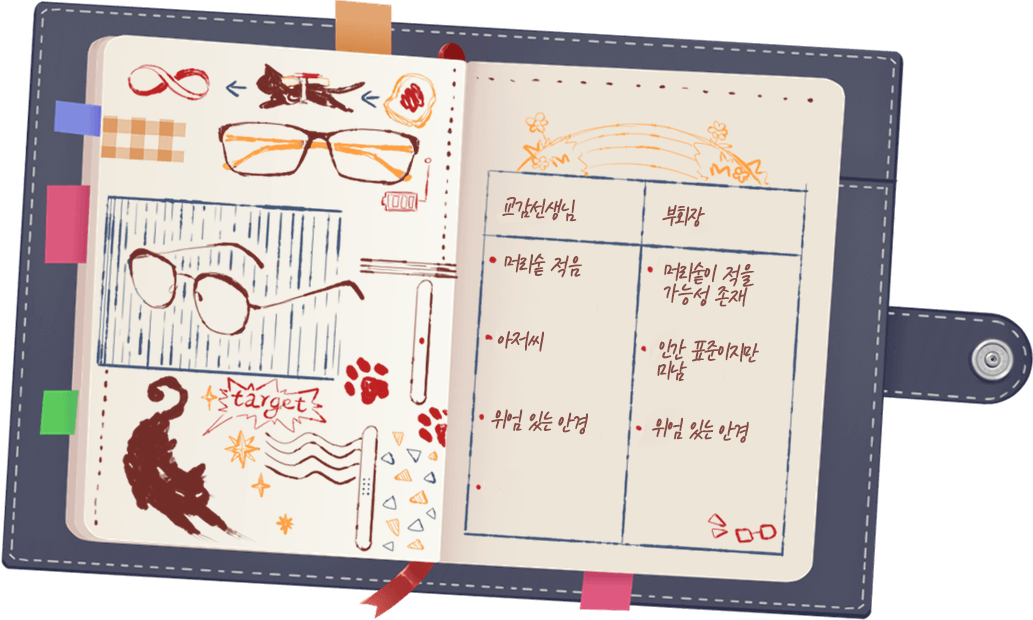
<style>
.page{position:relative;width:1033px;height:620px}
.page>*{position:absolute;margin:0}
.t1{font:27.3px "KCC-eunyoung-Regular";letter-spacing:-0.08em;color:#884d46;font-weight:bold}
.t2{font:27.3px/22px "KCC-eunyoung-Regular";letter-spacing:-0.08em;color:#884d46;font-weight:bold}
</style>
<div class="page">
<p class="t1" style="left:502px;top:197px;width:75px;height:25px;rotate:3deg">교감선생님</p>
<p class="t1" style="left:662px;top:204px;width:43px;height:23px;rotate:3deg">부회장</p>
<p class="t1" style="left:504px;top:253px;width:78px;height:25px;rotate:3deg">머리숱 적음</p>
<p class="t2" style="left:663px;top:261px;width:92px;height:46px;rotate:3deg">머리숱이 적을<br>가능성 존재</p>
<p class="t1" style="left:497px;top:331px;width:48px;height:21px;rotate:3deg">아저씨</p>
<p class="t2" style="left:657px;top:338px;width:102px;height:44px;rotate:3deg">인간 표준이지만<br>미남</p>
<p class="t1" style="left:491px;top:409px;width:97px;height:26px;rotate:3deg">위엄 있는 안경</p>
<p class="t1" style="left:652px;top:417px;width:97px;height:26px;rotate:3deg">위엄 있는 안경</p>
</div>
